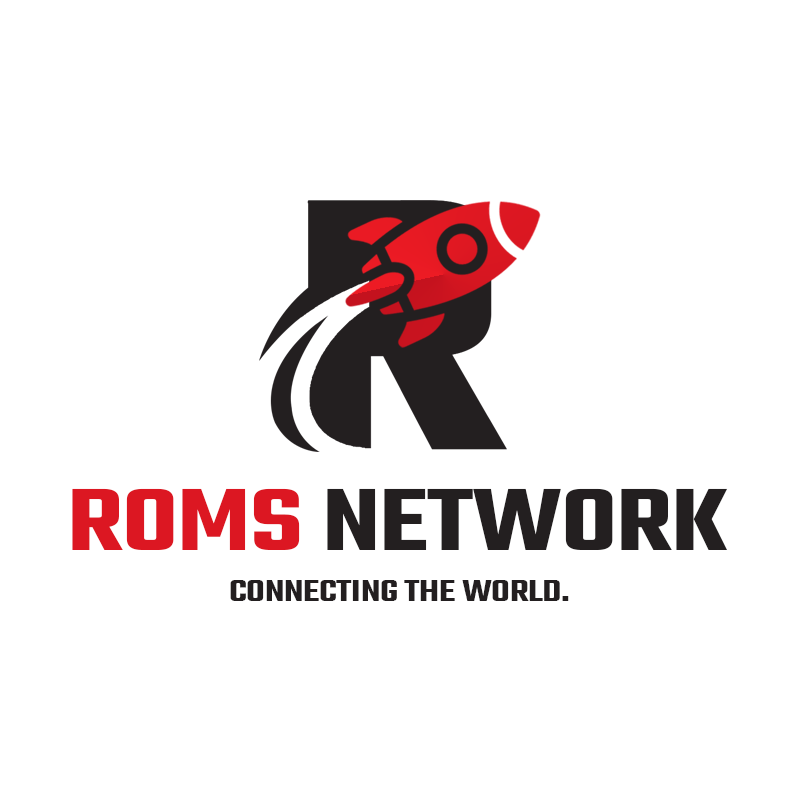
<style>
.page{position:relative;width:800px;height:800px;background:#ffffff}
.page>*{position:absolute;margin:0}
.t1{font:96px "Teko-SemiBold";letter-spacing:-0.01em;color:#231f20;text-transform:uppercase;scale:1.25 1}
.t2{font:96px "Teko-SemiBold";letter-spacing:-0.01em;color:#dc1722;text-transform:uppercase;scale:1.25 1}
.t3{font:32px "Teko-SemiBold";letter-spacing:-0.01em;color:#231f20;text-transform:uppercase;scale:1.25 1}
</style>
<div class="page">
<p class="t1" style="left:72px;top:488px;width:656px;height:62px"><span class="t2">Roms </span>Network</p>
<p class="t3" style="left:230px;top:580px;width:339px;height:21px">Connecting The wORLD.</p>
</div>
